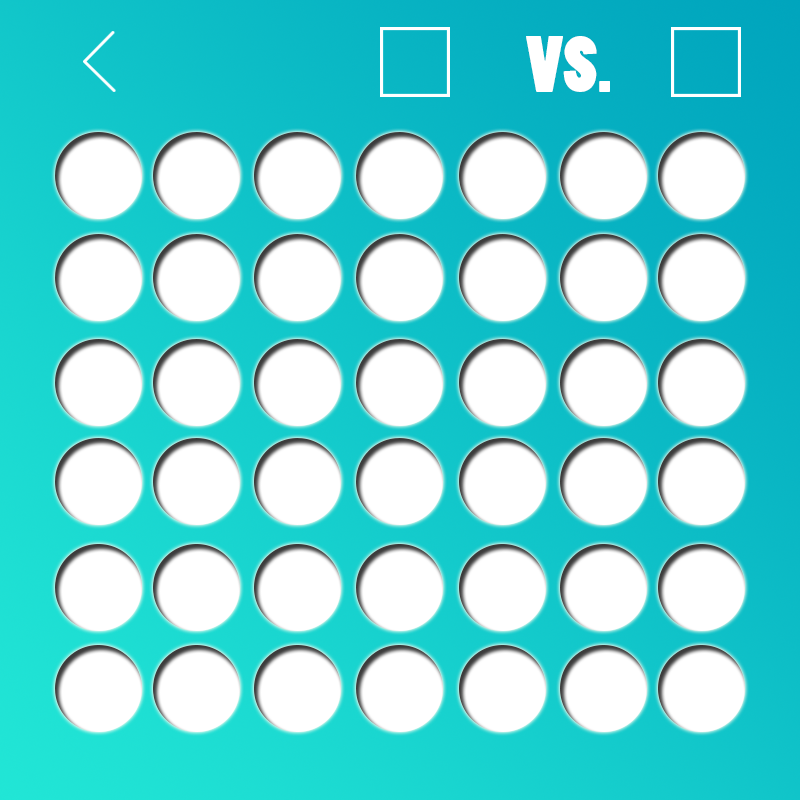
<style>
.page{position:relative;width:800px;height:800px;background:#ffffff}
.page>*{position:absolute;margin:0}
.t1{font:75px "PoplarStd";color:#ffffff}
</style>
<div class="page">
<p class="t1" style="left:526px;top:36px;width:84px;height:56px">VS.</p>
</div>
